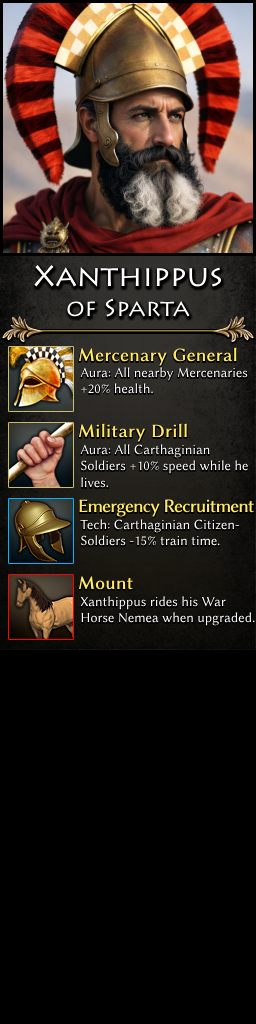
<style>
.page{position:relative;width:256px;height:1024px;background:#000000}
.page>*{position:absolute;margin:0}
.t1{font:30px/30px "Lithos";color:#ffffff}
.t2{font:24px/30px "Lithos";color:#ffffff}
.t3{font:19px "LinBiolinumO";color:#ffe963;font-weight:bold}
.t4{font:14px "LinBiolinumO";color:#ffffff}
.t5{font:19px "LinBiolinumO";letter-spacing:-0.06em;color:#ffe963;font-weight:bold}
</style>
<div class="page">
<p class="t1" style="left:34px;top:264px;width:188px;height:53px;text-align:center">Xanthippus<br><span class="t2">of Sparta</span></p>
<p class="t3" style="left:78px;top:347px;width:159px;height:19px">Mercenary General</p>
<p class="t4" style="left:80px;top:367px;width:168px;height:27px">Aura: All nearby Mercenaries<br>+20% health.</p>
<p class="t3" style="left:78px;top:423px;width:109px;height:19px">Military Drill</p>
<p class="t4" style="left:80px;top:444px;width:168px;height:44px">Aura: All Carthaginian<br>Soldiers +10% speed while he<br>lives.</p>
<p class="t5" style="left:79px;top:499px;width:175px;height:18px">Emergency Recruitment</p>
<p class="t4" style="left:80px;top:519px;width:160px;height:27px">Tech: Carthaginian Citizen-<br>Soldiers -15% train time.</p>
<p class="t3" style="left:78px;top:576px;width:55px;height:14px">Mount</p>
<p class="t4" style="left:80px;top:596px;width:175px;height:30px">Xanthippus rides his War<br>Horse Nemea when upgraded.</p>
</div>
